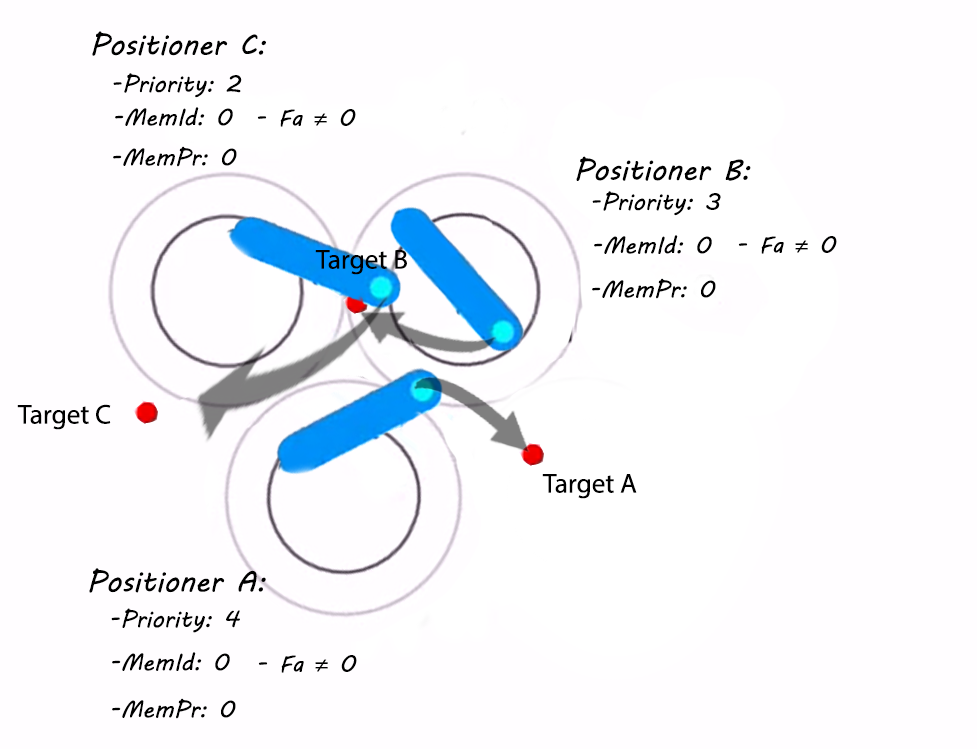
<style>
.page{position:relative;width:977px;height:749px;background:#fffdff}
.page>*{position:absolute;margin:0}
.t1{font:50px "MVBoli";color:#000000}
.t2{font:40px "MVBoli";color:#000000}
.t3{font:40px "MyriadPro-Regular";color:#000000}
.t4{font:46.7px "MyriadPro-Regular";color:#000000}
</style>
<div class="page">
<p class="t1" style="left:92px;top:31px;width:174px;height:25px">Positioner C:</p>
<p class="t2" style="left:113px;top:73px;width:129px;height:25px">-Priority: 2</p>
<p class="t2" style="left:115px;top:107px;width:118px;height:19px">-MemId: 0</p>
<p class="t2" style="left:257px;top:109px;width:99px;height:18px">- Fa <span class="t3">≠</span> 0</p>
<p class="t2" style="left:113px;top:146px;width:124px;height:21px">-MemPr: 0</p>
<p class="t1" style="left:576px;top:156px;width:175px;height:25px">Positioner B:</p>
<p class="t2" style="left:592px;top:191px;width:129px;height:25px">-Priority: 3</p>
<p class="t2" style="left:594px;top:235px;width:118px;height:19px">-MemId: 0</p>
<p class="t2" style="left:738px;top:236px;width:99px;height:18px">- Fa <span class="t3">≠</span> 0</p>
<p class="t4" style="left:315px;top:250px;width:92px;height:25px">Target B</p>
<p class="t2" style="left:592px;top:278px;width:124px;height:21px">-MemPr: 0</p>
<p class="t4" style="left:17px;top:404px;width:94px;height:26px">Target C</p>
<p class="t4" style="left:542px;top:474px;width:95px;height:25px">Target A</p>
<p class="t1" style="left:89px;top:568px;width:177px;height:25px">Positioner A:</p>
<p class="t2" style="left:111px;top:608px;width:129px;height:25px">-Priority: 4</p>
<p class="t2" style="left:112px;top:652px;width:118px;height:19px">-MemId: 0</p>
<p class="t2" style="left:258px;top:655px;width:99px;height:18px">- Fa <span class="t3">≠</span> 0</p>
<p class="t2" style="left:112px;top:698px;width:124px;height:21px">-MemPr: 0</p>
</div>
